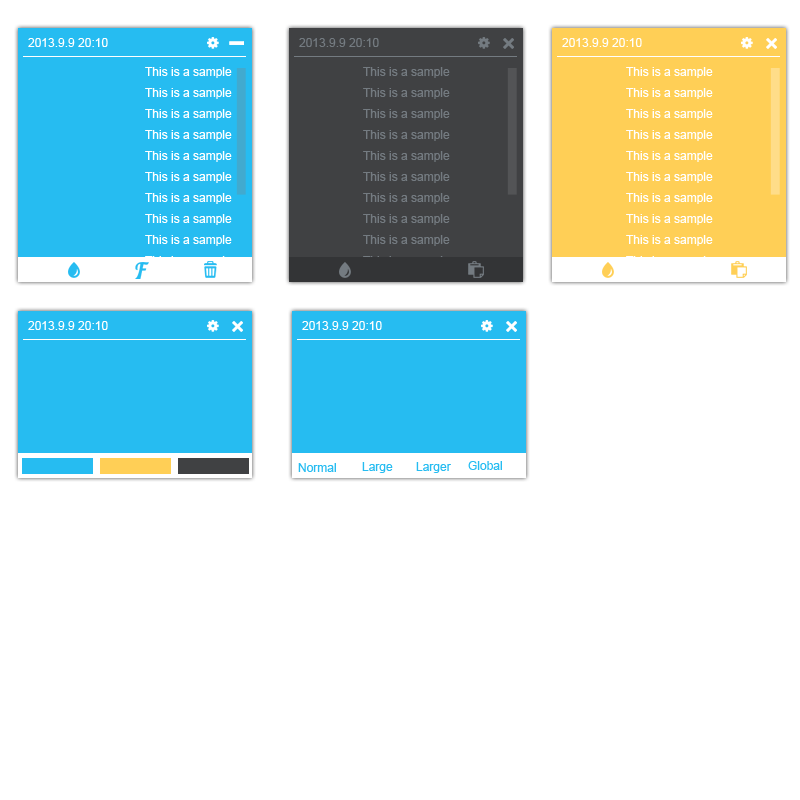
<style>
.page{position:relative;width:800px;height:800px;background:#ffffff}
.page>*{position:absolute;margin:0}
.t1{font:12px "ArialMT";color:#ffffff}
.t2{font:12px "ArialMT";color:#747b81}
.t3{font:12px "ArialMT";color:#26bcf1}
</style>
<div class="page">
<p class="t1" style="left:28px;top:38px;width:80px;height:9px">2013.9.9 20:10</p>
<p class="t2" style="left:299px;top:38px;width:80px;height:9px">2013.9.9 20:10</p>
<p class="t1" style="left:562px;top:38px;width:80px;height:9px">2013.9.9 20:10</p>
<p class="t1" style="left:145px;top:67px;width:87px;height:200px">This is a sample<br>This is a sample<br>This is a sample<br>This is a sample<br>This is a sample<br>This is a sample<br>This is a sample<br>This is a sample<br>This is a sample<br>This is a sample</p>
<p class="t2" style="left:363px;top:67px;width:87px;height:200px">This is a sample<br>This is a sample<br>This is a sample<br>This is a sample<br>This is a sample<br>This is a sample<br>This is a sample<br>This is a sample<br>This is a sample<br>This is a sample</p>
<p class="t1" style="left:626px;top:67px;width:87px;height:200px">This is a sample<br>This is a sample<br>This is a sample<br>This is a sample<br>This is a sample<br>This is a sample<br>This is a sample<br>This is a sample<br>This is a sample<br>This is a sample</p>
<p class="t1" style="left:28px;top:321px;width:80px;height:9px">2013.9.9 20:10</p>
<p class="t1" style="left:302px;top:321px;width:80px;height:9px">2013.9.9 20:10</p>
<p class="t3" style="left:362px;top:462px;width:31px;height:11px">Large</p>
<p class="t3" style="left:416px;top:462px;width:35px;height:11px">Larger</p>
<p class="t3" style="left:468px;top:461px;width:34px;height:9px">Global</p>
<p class="t3" style="left:298px;top:463px;width:38px;height:9px">Normal</p>
</div>
